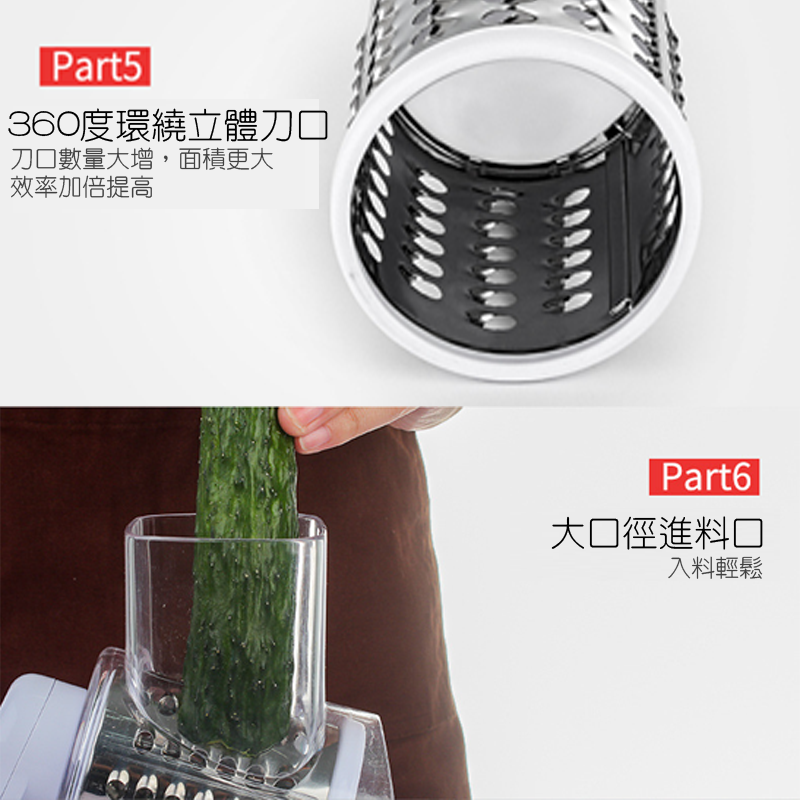
<style>
.page{position:relative;width:800px;height:800px}
.page>*{position:absolute;margin:0}
.t1{font:36px "HanWangYenLight";color:#000000}
.t2{font:24px "HanWangYenLight";color:#404040}
</style>
<div class="page">
<p class="t1" style="left:8px;top:108px;width:320px;height:34px">360度環繞立體刀口</p>
<p class="t2" style="left:10px;top:147px;width:263px;height:51px">刀口數量大增，面積更大<br>效率加倍提高</p>
<p class="t1" style="left:551px;top:516px;width:212px;height:34px">大口徑進料口</p>
<p class="t2" style="left:668px;top:556px;width:95px;height:23px">入料輕鬆</p>
</div>
